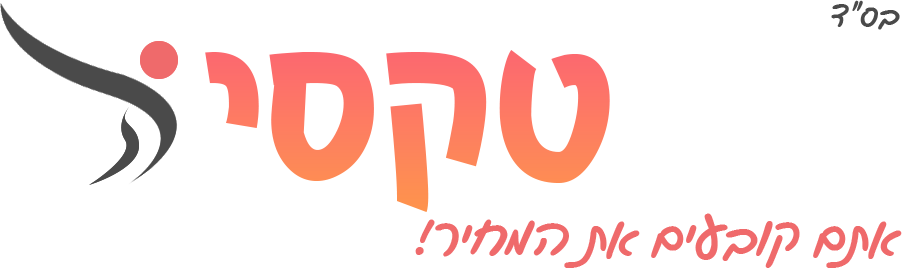
<style>
.page{position:relative;width:902px;height:268px;background:#ffffff}
.page>*{position:absolute;margin:0}
.t1{font:33.3px "GveretLevinAlefAlefAlef-Regular";color:#4a4a4a}
.t2{font:249.8px "YoavBold";color:#fd7964}
.t3{font:54.2px "GveretLevinAlefAlefAlef-Regular";color:#ef6a6b}
</style>
<div class="page">
<p class="t1" style="left:831px;top:0px;width:69px;height:30px">בס”ד</p>
<p class="t2" style="left:205px;top:50px;width:405px;height:162px">טקסי</p>
<p class="t3" style="left:415px;top:213px;width:487px;height:55px">!אתם קובעים את המחיר</p>
</div>
